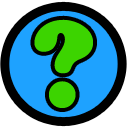
<style>
.page{position:relative;width:128px;height:128px;background:#1ea2ff}
.page>*{position:absolute;margin:0}
.t1{font:119.5px "CooperBlackStd";color:#3cd400}
</style>
<div class="page">
<p class="t1" style="left:34px;top:19px;width:59px;height:89px">?</p>
</div>
